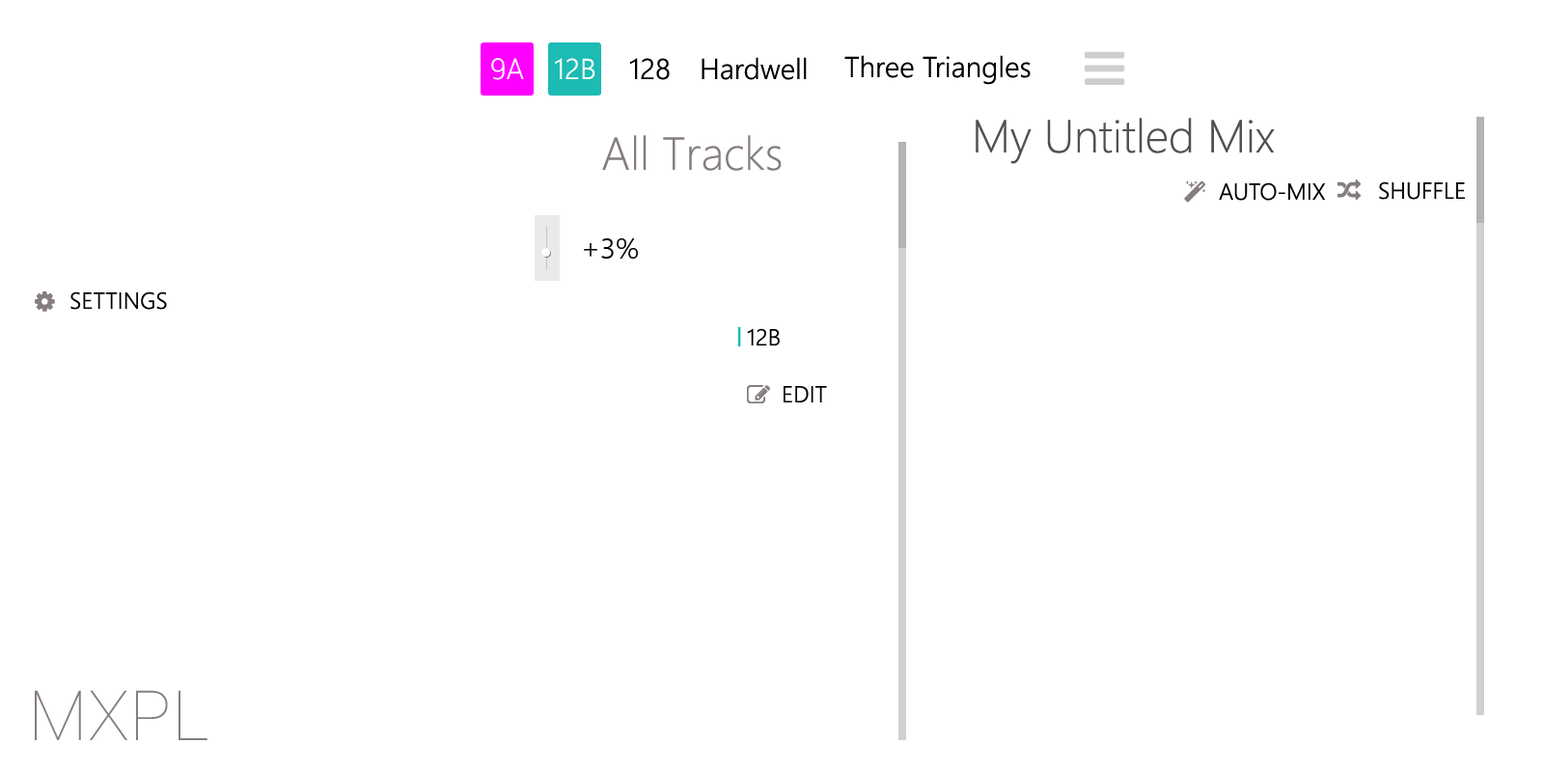
<style>
.page{position:relative;width:1544px;height:772px;background:#ffffff}
.page>*{position:absolute;margin:0}
.t1{font:29px "Roboto-Light";color:#ffffff;text-transform:uppercase}
.t2{font:29px "SegoeUI-Semilight";color:#ffffff;text-transform:uppercase}
.t3{font:29px "SegoeUI-Semilight";color:#000000;text-transform:uppercase}
.t4{font:29px "SegoeUI-Semilight";color:#000000}
.t5{font:46.3px "SegoeUI-Light";color:#4e5153}
.t6{font:46.3px "SegoeUI-Light";color:#867d7d}
.t7{font:23.2px "SegoeUI-Semilight";color:#000000;text-transform:uppercase}
.t8{font:69.5px "Roboto-Thin";color:#867d7d}
</style>
<div class="page">
<p class="t1" style="left:491px;top:58px;width:33px;height:22px">9A</p>
<p class="t2" style="left:555px;top:58px;width:41px;height:21px">12B</p>
<p class="t3" style="left:630px;top:58px;width:40px;height:22px">128</p>
<p class="t4" style="left:702px;top:57px;width:105px;height:23px">Hardwell</p>
<p class="t4" style="left:845px;top:55px;width:186px;height:30px">Three Triangles</p>
<p class="t5" style="left:976px;top:118px;width:299px;height:46px">My Untitled Mix</p>
<p class="t6" style="left:602px;top:135px;width:180px;height:36px">All Tracks</p>
<p class="t7" style="left:1219px;top:182px;width:106px;height:19px">auto-mix</p>
<p class="t7" style="left:1379px;top:181px;width:86px;height:19px">Shuffle</p>
<p class="t3" style="left:584px;top:238px;width:54px;height:21px">+3%</p>
<p class="t7" style="left:70px;top:291px;width:97px;height:19px">Settings</p>
<p class="t7" style="left:747px;top:328px;width:33px;height:18px">12B</p>
<p class="t7" style="left:784px;top:386px;width:43px;height:16px">edit</p>
<p class="t8" style="left:35px;top:690px;width:173px;height:50px">MXPL</p>
</div>
